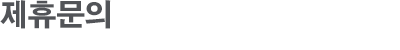
<style>
.page{position:relative;width:400px;height:50px;background:#ffffff}
.page>*{position:absolute;margin:0}
.t1{font:30px "MCgdtk";letter-spacing:-0.035em;color:#525458;scale:0.97 1}
</style>
<div class="page">
<p class="t1" style="left:0px;top:0px;width:111px;height:29px">제휴문의</p>
</div>
